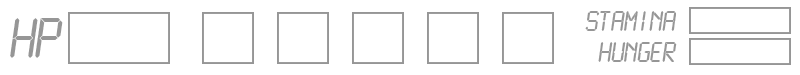
<style>
.page{position:relative;width:800px;height:75px;background:#ffffff}
.page>*{position:absolute;margin:0}
.t1{font:25px "LCDMonoNormal";color:#969696}
.t2{font:50px "LCDMonoNormal";color:#969696}
</style>
<div class="page">
<p class="t1" style="left:585px;top:11px;width:91px;height:20px">STAMINA</p>
<p class="t2" style="left:10px;top:18px;width:53px;height:40px">HP</p>
<p class="t1" style="left:598px;top:42px;width:79px;height:20px">Hunger</p>
</div>
